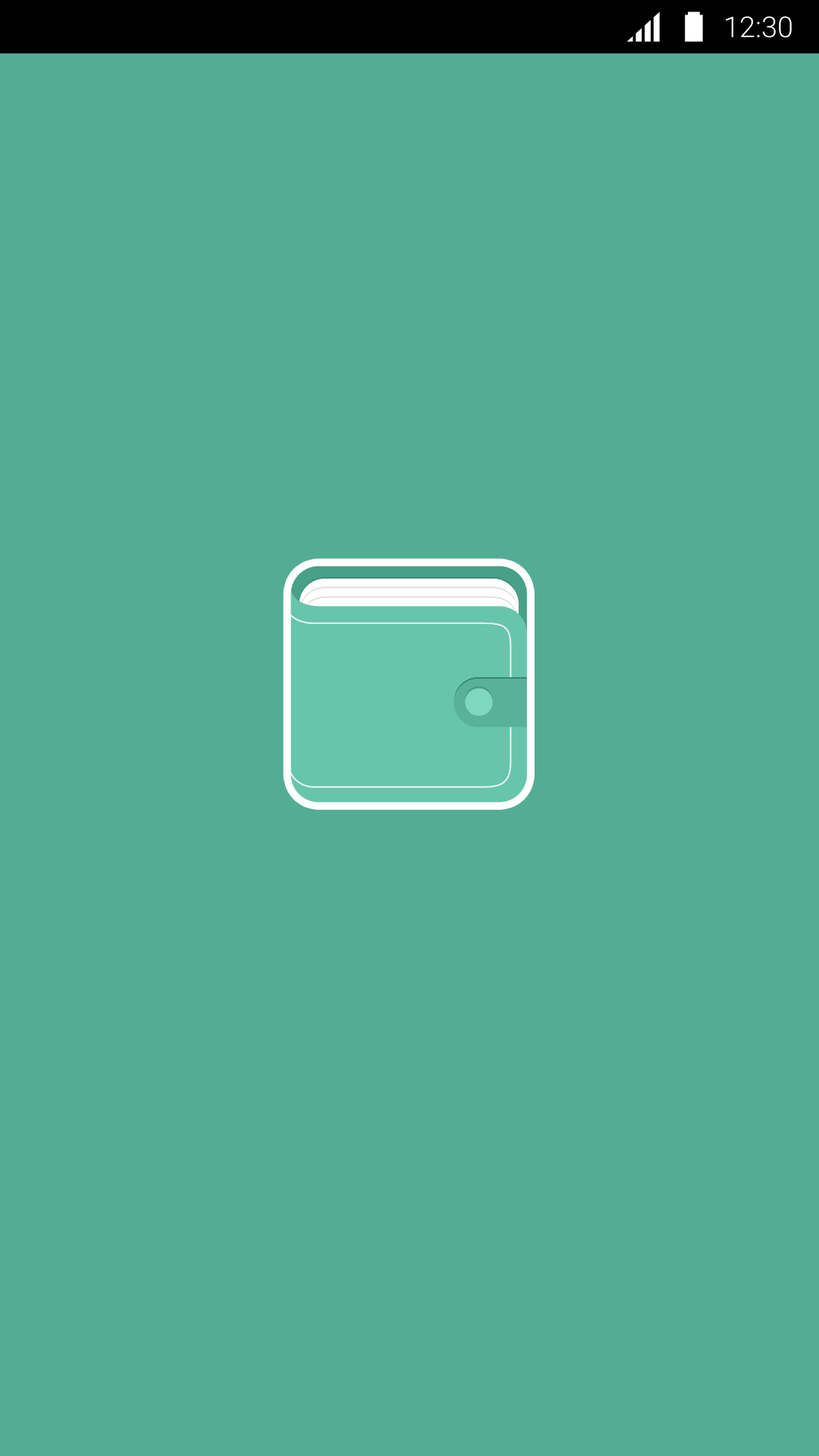
<style>
.page{position:relative;width:819px;height:1456px;background:#53ad94}
.page>*{position:absolute;margin:0}
.t1{font:28.8px "Roboto-Light";color:#ffffff}
</style>
<div class="page">
<p class="t1" style="left:726px;top:16px;width:66px;height:22px">12:30</p>
</div>
